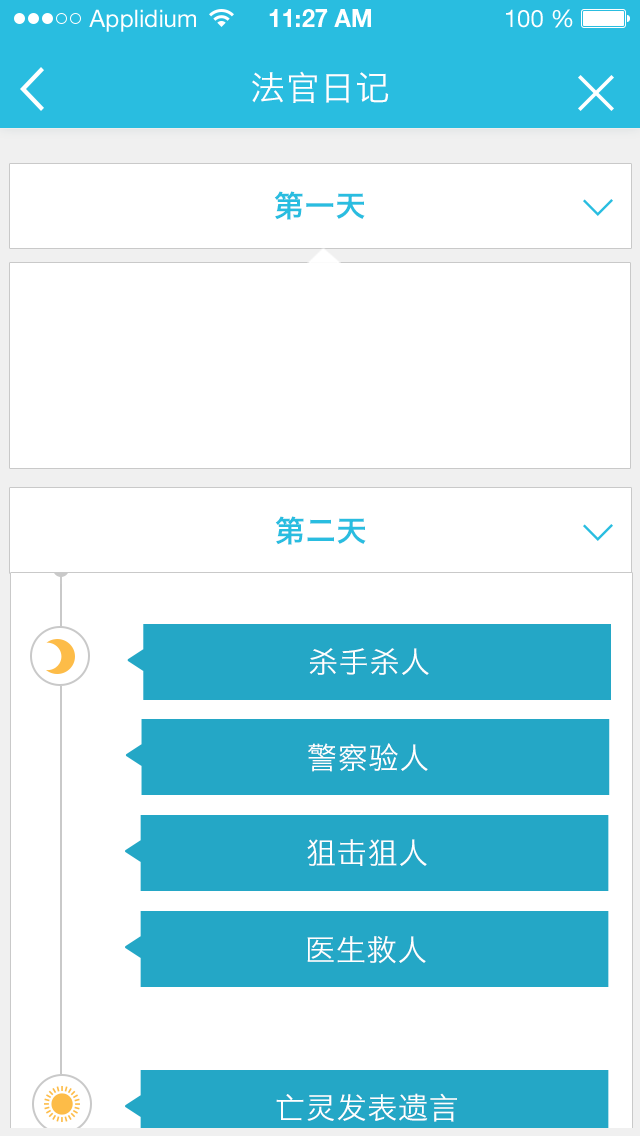
<style>
.page{position:relative;width:640px;height:1136px;background:#ffffff}
.page>*{position:absolute;margin:0}
.t1{font:34px "HiraginoSansGB-W3";letter-spacing:0.025em;color:#ffffff}
.t2{font:30px "HiraginoSansGB-W6";letter-spacing:0.025em;color:#29bde0}
.t3{font:30px "HiraginoSansGB-W3";letter-spacing:0.025em;color:#ffffff}
</style>
<div class="page">
<p class="t1" style="left:252px;top:71px;width:137px;height:32px">法官日记</p>
<p class="t2" style="left:274px;top:191px;width:91px;height:29px">第一天</p>
<p class="t2" style="left:275px;top:516px;width:91px;height:29px">第二天</p>
<p class="t3" style="left:309px;top:648px;width:120px;height:27px">杀手杀人</p>
<p class="t3" style="left:308px;top:743px;width:120px;height:29px">警察验人</p>
<p class="t3" style="left:307px;top:839px;width:120px;height:27px">狙击狙人</p>
<p class="t3" style="left:307px;top:936px;width:119px;height:28px">医生救人</p>
<p class="t3" style="left:276px;top:1093px;width:181px;height:29px">亡灵发表遗言</p>
</div>
